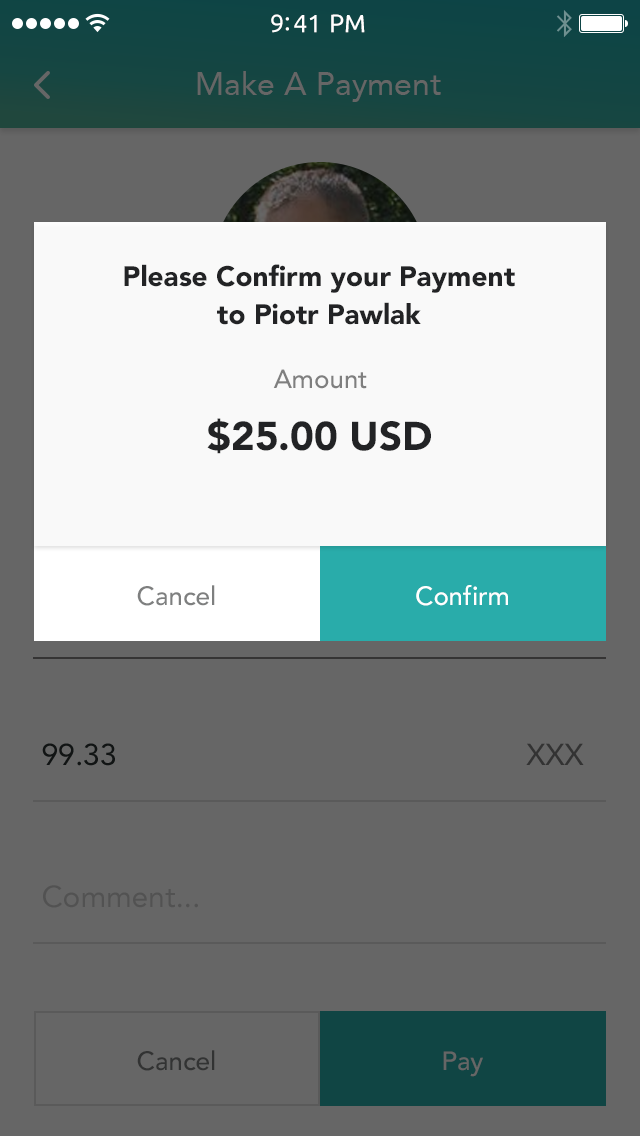
<style>
.page{position:relative;width:640px;height:1136px;background:#666666}
.page>*{position:absolute;margin:0}
.t1{font:25px "Ubuntu";color:#ffffff}
.t2{font:28px/38px "Avenir-Black";color:#222325}
.t3{font:26px "Avenir-Medium";color:#7f7f7f}
.t4{font:40px "Avenir-Black";color:#222325}
.t5{font:26px "Avenir-Medium";color:#7e7f7f}
.t6{font:26px "Avenir-Medium";color:#ffffff}
</style>
<div class="page">
<p class="t1" style="left:271px;top:14px;width:94px;height:19px">9:41 PM</p>
<p class="t2" style="left:124px;top:264px;width:391px;height:61px;text-align:center">Please Confirm your Payment<br>to Piotr Pawlak</p>
<p class="t3" style="left:273px;top:369px;width:94px;height:20px">Amount</p>
<p class="t4" style="left:207px;top:418px;width:224px;height:36px">$25.00 USD</p>
<p class="t5" style="left:137px;top:585px;width:78px;height:21px">Cancel</p>
<p class="t6" style="left:416px;top:585px;width:92px;height:21px">Confirm</p>
</div>
